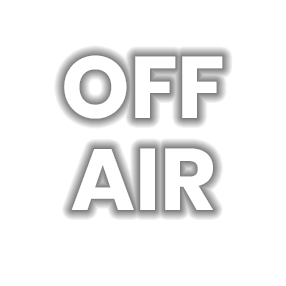
<style>
.page{position:relative;width:286px;height:286px;background:#ffffff}
.page>*{position:absolute;margin:0}
.t1{font:87px/92px "Poppins-Bold";color:#ffffff}
</style>
<div class="page">
<p class="t1" style="left:64px;top:55px;width:159px;height:155px;text-align:center">OFF<br>AIR</p>
</div>
